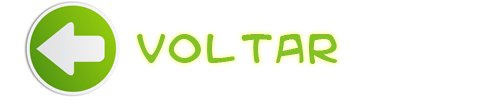
<style>
.page{position:relative;width:500px;height:107px;background:#ffffff}
.page>*{position:absolute;margin:0}
.t1{font:36px "KidKosmic";color:#83c124}
</style>
<div class="page">
<p class="t1" style="left:137px;top:34px;width:200px;height:30px">Voltar</p>
</div>
